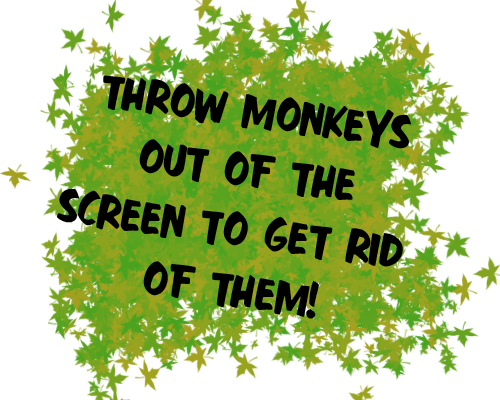
<style>
.page{position:relative;width:500px;height:400px;background:#ffffff}
.page>*{position:absolute;margin:0}
.t1{font:50px "FastAction";color:#000000}
</style>
<div class="page">
<p class="t1" style="left:57px;top:75px;width:354px;height:244px;text-align:center;rotate:8deg">THROW MONKEYS<br>OUT OF THE<br>SCREEN TO GET RID <br>OF THEM!</p>
</div>
